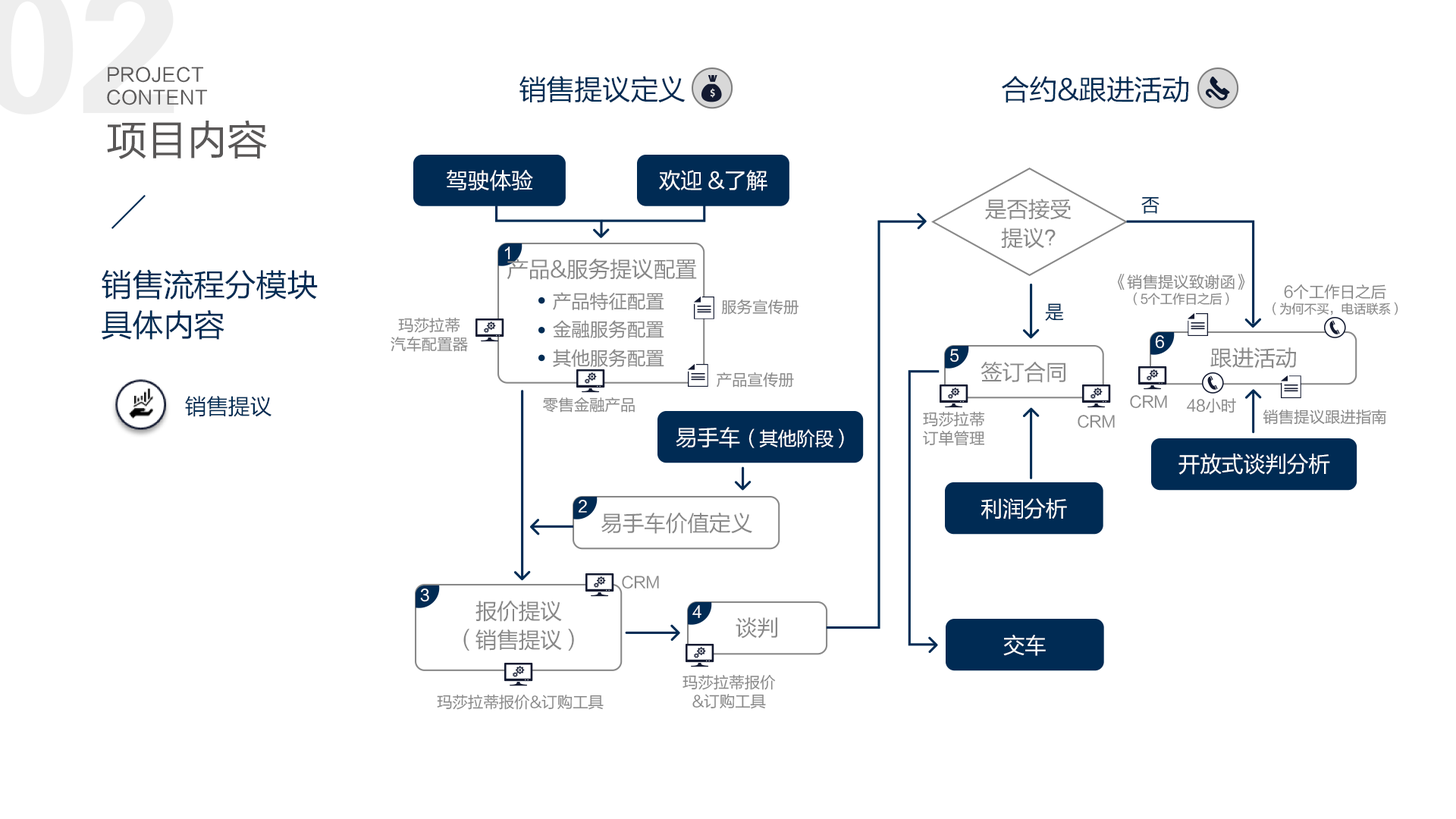
<style>
.page{position:relative;width:1456px;height:819px;background:#ffffff}
.page>*{position:absolute;margin:0}
.t1{font:18.8px "FZLTHJW--GB1-0";letter-spacing:0.02em;color:#595757}
.t2{font:28.4px "FZLTHJW--GB1-0";letter-spacing:-0.02em;color:#002c54}
.t3{font:41.1px "FZLTHJW--GB1-0";letter-spacing:-0.02em;color:#595757}
.t4{font:22.1px "FZLTHJW--GB1-0";letter-spacing:-0.02em;color:#ffffff}
.t5{font:19px "FZLTHJW--GB1-0";letter-spacing:-0.02em;color:#002c54}
.t6{font:22.1px/28.4px "FZLTHJW--GB1-0";letter-spacing:-0.02em;color:#888888}
.t7{font:15.8px "FZLTHJW--GB1-0";letter-spacing:-0.02em;color:#ffffff}
.t8{font:31.6px/40.1px "FZLTHJW--GB1-0";letter-spacing:-0.02em;color:#002c54}
.t9{font:22.1px "FZLTHJW--GB1-0";letter-spacing:-0.02em;color:#888888}
.t10{font:15.8px/15.8px "FZLTHJW--GB1-0";letter-spacing:-0.02em;color:#888888}
.t11{font:12.6px/15.8px "FZLTHJW--GB1-0";letter-spacing:-0.02em;color:#888888}
.t12{font:19px/28.4px "FZLTHJW--GB1-0";letter-spacing:-0.02em;color:#888888}
.t13{font:15.8px "FZLTHJW--GB1-0";letter-spacing:-0.02em;color:#888888}
.t14{font:15.8px/19px "FZLTHJW--GB1-0";letter-spacing:-0.02em;color:#888888}
.t15{font:22.1px "FZLTHJW--GB1-0";letter-spacing:-0.02em;color:#002c54}
.t16{font:19px "FZLTHJW--GB1-0";letter-spacing:-0.02em;color:#ffffff}
</style>
<div class="page">
<p class="t1" style="left:107px;top:67px;width:101px;height:38px">PROJECT <br>CONTENT</p>
<p class="t2" style="left:519px;top:76px;width:167px;height:27px">销售提议定义</p>
<p class="t2" style="left:1002px;top:76px;width:187px;height:27px">合约&amp;跟进活动</p>
<p class="t3" style="left:107px;top:120px;width:160px;height:39px">项目内容</p>
<p class="t4" style="left:446px;top:170px;width:87px;height:21px">驾驶体验</p>
<p class="t4" style="left:659px;top:170px;width:108px;height:21px">欢迎 &amp;了解</p>
<p class="t5" style="left:1141px;top:196px;width:18px;height:18px">否</p>
<p class="t6" style="left:985px;top:199px;width:87px;height:50px;text-align:center">是否接受<br>  提议？</p>
<p class="t7" style="left:504px;top:246px;width:6px;height:13px">1</p>
<p class="t8" style="left:102px;top:269px;width:216px;height:71px">销售流程分模块<br>具体内容</p>
<p class="t9" style="left:507px;top:259px;width:190px;height:21px">产品&amp;服务提议配置</p>
<p class="t10" style="left:1118px;top:274px;width:127px;height:32px;text-align:center">《销售提议致谢函》<br><span class="t11">（5个工作日之后）</span></p>
<p class="t12" style="left:553px;top:292px;width:111px;height:75px;text-align:center">产品特征配置<br>金融服务配置<br>其他服务配置</p>
<p class="t11" style="left:1272px;top:284px;width:126px;height:31px;text-align:center"><span class="t10">6个工作日之后<br></span>（为何不买，电话联系）</p>
<p class="t13" style="left:721px;top:299px;width:78px;height:16px">服务宣传册</p>
<p class="t5" style="left:1045px;top:303px;width:19px;height:18px">是</p>
<p class="t14" style="left:391px;top:317px;width:77px;height:35px;text-align:center">玛莎拉蒂<br>汽车配置器</p>
<p class="t7" style="left:1155px;top:335px;width:10px;height:14px">6</p>
<p class="t7" style="left:950px;top:349px;width:9px;height:13px">5</p>
<p class="t9" style="left:1210px;top:347px;width:86px;height:22px">跟进活动</p>
<p class="t9" style="left:981px;top:362px;width:84px;height:21px">签订合同</p>
<p class="t13" style="left:717px;top:372px;width:77px;height:16px">产品宣传册</p>
<p class="t15" style="left:185px;top:396px;width:86px;height:21px">销售提议</p>
<p class="t13" style="left:543px;top:397px;width:92px;height:16px">零售金融产品</p>
<p class="t13" style="left:1130px;top:395px;width:37px;height:14px">CRM</p>
<p class="t13" style="left:1187px;top:398px;width:49px;height:15px">48小时</p>
<p class="t14" style="left:923px;top:411px;width:62px;height:35px;text-align:center">玛莎拉蒂<br>订单管理</p>
<p class="t13" style="left:1263px;top:409px;width:123px;height:16px">销售提议跟进指南</p>
<p class="t13" style="left:1078px;top:415px;width:37px;height:13px">CRM</p>
<p class="t16" style="left:676px;top:427px;width:168px;height:21px"><span class="t4">易手车</span>（其他阶段）</p>
<p class="t4" style="left:1178px;top:453px;width:152px;height:22px">开放式谈判分析</p>
<p class="t7" style="left:579px;top:500px;width:8px;height:13px">2</p>
<p class="t4" style="left:981px;top:498px;width:86px;height:21px">利润分析</p>
<p class="t9" style="left:601px;top:513px;width:151px;height:21px">易手车价值定义</p>
<p class="t13" style="left:622px;top:576px;width:37px;height:13px">CRM</p>
<p class="t7" style="left:420px;top:588px;width:9px;height:14px">3</p>
<p class="t6" style="left:463px;top:601px;width:111px;height:50px;text-align:center">报价提议<br>（销售提议）</p>
<p class="t7" style="left:692px;top:605px;width:9px;height:13px">4</p>
<p class="t9" style="left:736px;top:617px;width:41px;height:22px">谈判</p>
<p class="t4" style="left:1003px;top:635px;width:43px;height:21px">交车</p>
<p class="t14" style="left:682px;top:674px;width:94px;height:35px;text-align:center">玛莎拉蒂报价<br>&amp;订购工具</p>
<p class="t13" style="left:437px;top:694px;width:167px;height:16px">玛莎拉蒂报价&amp;订购工具</p>
</div>
